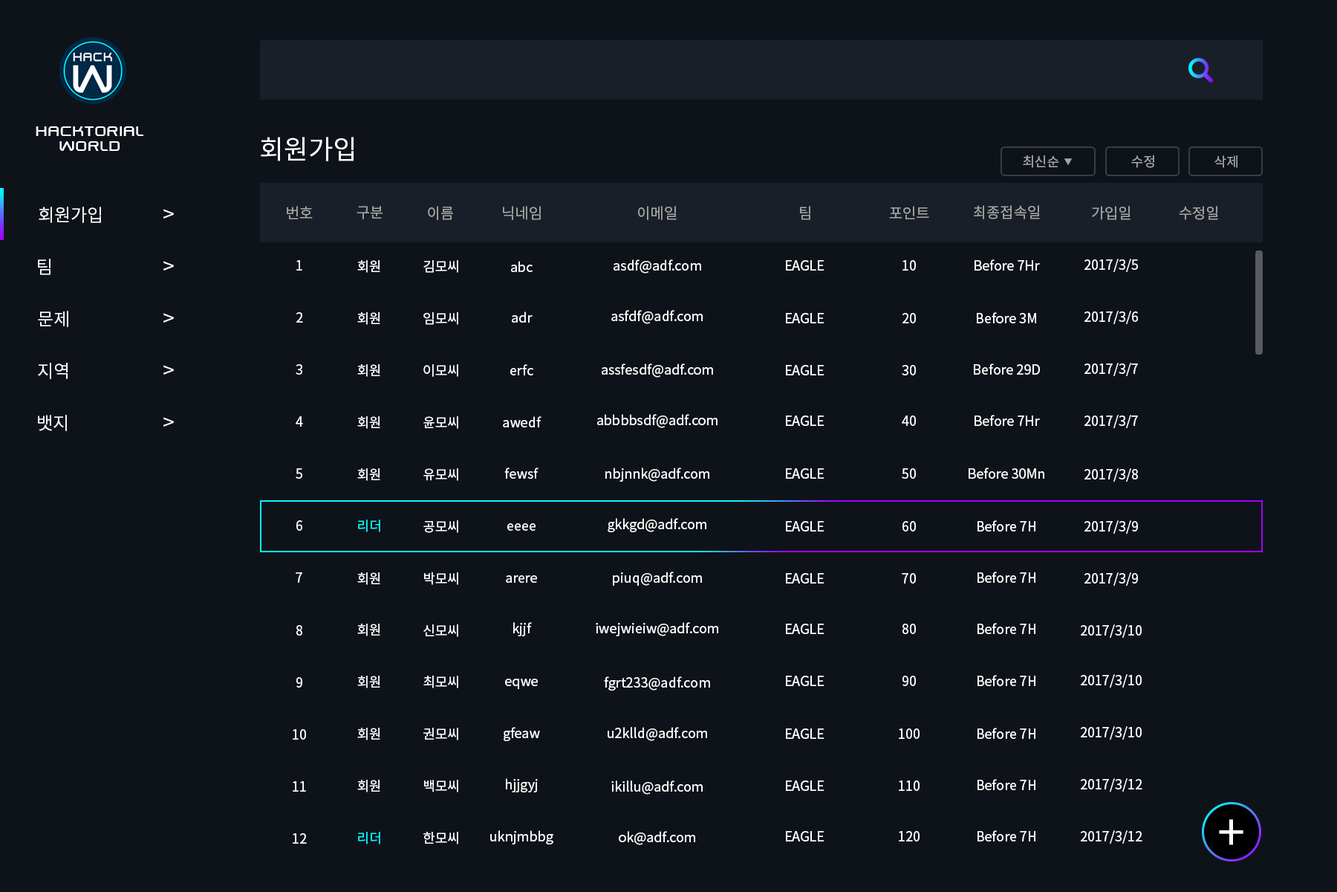
<style>
.page{position:relative;width:1337px;height:892px;background:#0e131a}
.page>*{position:absolute;margin:0}
.t1{font:17.8px/14.9px "SwiszRegular";color:#ffffff}
.t2{font:26.7px "NotoSansCJKkr-Regular";color:#ffffff}
.t3{font:13.4px "NotoSansCJKkr-Regular";color:#a6a6a6}
.t4{font:7.4px "NotoSansCJKkr-Regular";color:#a6a6a6}
.t5{font:13.4px "NotoSansCJKkr-Regular";color:#a3a3a3}
.t6{font:17.8px "NotoSansCJKkr-Regular";color:#ffffff}
.t7{font:20.8px "NotoSansCJKkr-Regular";color:#ffffff}
.t8{font:14.9px "NotoSansCJKkr-Regular";color:#a3a3a3}
.t9{font:13.4px "NotoSansCJKkr-Regular";color:#ffffff}
.t10{font:13.4px "NotoSansCJKkr-Regular";color:#00ffff}
.t11{font:49.8px "NotoSansCJKkr-Regular";color:#ffffff}
</style>
<div class="page">
<p class="t1" style="left:36px;top:126px;width:107px;height:25px;text-align:center">hacktorial<br>world</p>
<p class="t2" style="left:261px;top:137px;width:93px;height:24px">회원가입</p>
<p class="t3" style="left:1023px;top:155px;width:37px;height:13px">최신순</p>
<p class="t4" style="left:1065px;top:158px;width:7px;height:7px">▼</p>
<p class="t3" style="left:1132px;top:155px;width:23px;height:13px">수정</p>
<p class="t5" style="left:1215px;top:155px;width:23px;height:13px">삭제</p>
<p class="t6" style="left:39px;top:207px;width:62px;height:16px">회원가입</p>
<p class="t7" style="left:163px;top:209px;width:11px;height:9px">&gt;</p>
<p class="t8" style="left:287px;top:206px;width:26px;height:13px">번호</p>
<p class="t8" style="left:357px;top:206px;width:26px;height:13px">구분</p>
<p class="t8" style="left:428px;top:206px;width:25px;height:14px">이름</p>
<p class="t8" style="left:503px;top:206px;width:38px;height:14px">닉네임</p>
<p class="t8" style="left:638px;top:206px;width:39px;height:14px">이메일</p>
<p class="t8" style="left:800px;top:206px;width:11px;height:14px">팀</p>
<p class="t8" style="left:889px;top:206px;width:40px;height:13px">포인트</p>
<p class="t8" style="left:974px;top:205px;width:66px;height:14px">최종접속일</p>
<p class="t8" style="left:1092px;top:206px;width:39px;height:14px">가입일</p>
<p class="t8" style="left:1179px;top:206px;width:40px;height:14px">수정일</p>
<p class="t6" style="left:38px;top:259px;width:13px;height:16px">팀</p>
<p class="t7" style="left:163px;top:261px;width:11px;height:9px">&gt;</p>
<p class="t9" style="left:296px;top:260px;width:6px;height:10px">1</p>
<p class="t9" style="left:357px;top:260px;width:23px;height:13px">회원</p>
<p class="t9" style="left:424px;top:260px;width:34px;height:13px">김모씨</p>
<p class="t9" style="left:511px;top:261px;width:22px;height:11px">abc</p>
<p class="t9" style="left:614px;top:259px;width:87px;height:14px">asdf@adf.com</p>
<p class="t9" style="left:786px;top:260px;width:39px;height:10px">EAGLE</p>
<p class="t9" style="left:903px;top:260px;width:13px;height:10px">10</p>
<p class="t9" style="left:975px;top:259px;width:65px;height:11px">Before 7Hr</p>
<p class="t9" style="left:1085px;top:259px;width:53px;height:13px">2017/3/5</p>
<p class="t6" style="left:38px;top:311px;width:30px;height:16px">문제</p>
<p class="t7" style="left:163px;top:313px;width:11px;height:9px">&gt;</p>
<p class="t9" style="left:296px;top:312px;width:7px;height:10px">2</p>
<p class="t9" style="left:357px;top:312px;width:23px;height:13px">회원</p>
<p class="t9" style="left:424px;top:312px;width:34px;height:13px">임모씨</p>
<p class="t9" style="left:512px;top:311px;width:21px;height:11px">adr</p>
<p class="t9" style="left:611px;top:310px;width:92px;height:14px">asfdf@adf.com</p>
<p class="t9" style="left:786px;top:313px;width:39px;height:10px">EAGLE</p>
<p class="t9" style="left:903px;top:313px;width:13px;height:10px">20</p>
<p class="t9" style="left:977px;top:312px;width:59px;height:11px">Before 3M</p>
<p class="t9" style="left:1085px;top:311px;width:53px;height:13px">2017/3/6</p>
<p class="t6" style="left:38px;top:363px;width:30px;height:16px">지역</p>
<p class="t7" style="left:163px;top:365px;width:11px;height:9px">&gt;</p>
<p class="t9" style="left:296px;top:364px;width:6px;height:10px">3</p>
<p class="t9" style="left:357px;top:364px;width:23px;height:13px">회원</p>
<p class="t9" style="left:424px;top:364px;width:34px;height:13px">이모씨</p>
<p class="t9" style="left:510px;top:364px;width:23px;height:11px">erfc</p>
<p class="t9" style="left:602px;top:363px;width:111px;height:14px">assfesdf@adf.com</p>
<p class="t9" style="left:786px;top:365px;width:39px;height:10px">EAGLE</p>
<p class="t9" style="left:902px;top:365px;width:14px;height:10px">30</p>
<p class="t9" style="left:974px;top:363px;width:66px;height:11px">Before 29D</p>
<p class="t9" style="left:1085px;top:363px;width:53px;height:13px">2017/3/7</p>
<p class="t9" style="left:597px;top:414px;width:121px;height:14px">abbbbsdf@adf.com</p>
<p class="t6" style="left:38px;top:415px;width:29px;height:16px">뱃지</p>
<p class="t7" style="left:163px;top:417px;width:11px;height:9px">&gt;</p>
<p class="t9" style="left:296px;top:416px;width:7px;height:10px">4</p>
<p class="t9" style="left:357px;top:416px;width:23px;height:13px">회원</p>
<p class="t9" style="left:424px;top:416px;width:34px;height:13px">윤모씨</p>
<p class="t9" style="left:503px;top:416px;width:39px;height:11px">awedf</p>
<p class="t9" style="left:786px;top:415px;width:39px;height:11px">EAGLE</p>
<p class="t9" style="left:902px;top:415px;width:14px;height:11px">40</p>
<p class="t9" style="left:975px;top:415px;width:65px;height:11px">Before 7Hr</p>
<p class="t9" style="left:1085px;top:415px;width:53px;height:13px">2017/3/7</p>
<p class="t9" style="left:296px;top:468px;width:6px;height:10px">5</p>
<p class="t9" style="left:357px;top:468px;width:23px;height:13px">회원</p>
<p class="t9" style="left:424px;top:468px;width:34px;height:13px">유모씨</p>
<p class="t9" style="left:504px;top:467px;width:35px;height:11px">fewsf</p>
<p class="t9" style="left:606px;top:467px;width:104px;height:14px">nbjnnk@adf.com</p>
<p class="t9" style="left:786px;top:468px;width:39px;height:10px">EAGLE</p>
<p class="t9" style="left:902px;top:468px;width:14px;height:10px">50</p>
<p class="t9" style="left:969px;top:467px;width:76px;height:11px">Before 30Mn</p>
<p class="t9" style="left:1085px;top:468px;width:53px;height:13px">2017/3/8</p>
<p class="t9" style="left:296px;top:520px;width:6px;height:11px">6</p>
<p class="t10" style="left:358px;top:519px;width:22px;height:13px">리더</p>
<p class="t9" style="left:424px;top:520px;width:34px;height:13px">공모씨</p>
<p class="t9" style="left:608px;top:518px;width:99px;height:14px">gkkgd@adf.com</p>
<p class="t9" style="left:786px;top:521px;width:39px;height:10px">EAGLE</p>
<p class="t9" style="left:903px;top:521px;width:13px;height:10px">60</p>
<p class="t9" style="left:978px;top:520px;width:58px;height:11px">Before 7H</p>
<p class="t9" style="left:1085px;top:520px;width:53px;height:13px">2017/3/9</p>
<p class="t9" style="left:507px;top:523px;width:29px;height:8px">eeee</p>
<p class="t9" style="left:296px;top:572px;width:6px;height:11px">7</p>
<p class="t9" style="left:357px;top:572px;width:23px;height:13px">회원</p>
<p class="t9" style="left:424px;top:571px;width:34px;height:14px">박모씨</p>
<p class="t9" style="left:506px;top:575px;width:31px;height:8px">arere</p>
<p class="t9" style="left:613px;top:571px;width:89px;height:14px">piuq@adf.com</p>
<p class="t9" style="left:786px;top:573px;width:39px;height:10px">EAGLE</p>
<p class="t9" style="left:902px;top:573px;width:14px;height:10px">70</p>
<p class="t9" style="left:978px;top:571px;width:58px;height:12px">Before 7H</p>
<p class="t9" style="left:1085px;top:572px;width:53px;height:13px">2017/3/9</p>
<p class="t9" style="left:296px;top:625px;width:6px;height:10px">8</p>
<p class="t9" style="left:357px;top:623px;width:23px;height:13px">회원</p>
<p class="t9" style="left:424px;top:624px;width:34px;height:13px">신모씨</p>
<p class="t9" style="left:513px;top:622px;width:19px;height:14px">kjjf</p>
<p class="t9" style="left:596px;top:622px;width:122px;height:14px">iwejwieiw@adf.com</p>
<p class="t9" style="left:786px;top:623px;width:39px;height:11px">EAGLE</p>
<p class="t9" style="left:903px;top:623px;width:13px;height:11px">80</p>
<p class="t9" style="left:978px;top:623px;width:58px;height:11px">Before 7H</p>
<p class="t9" style="left:1081px;top:624px;width:61px;height:13px">2017/3/10</p>
<p class="t9" style="left:296px;top:677px;width:6px;height:10px">9</p>
<p class="t9" style="left:357px;top:675px;width:23px;height:13px">회원</p>
<p class="t9" style="left:424px;top:675px;width:34px;height:13px">최모씨</p>
<p class="t9" style="left:604px;top:676px;width:106px;height:14px">fgrt233@adf.com</p>
<p class="t9" style="left:786px;top:675px;width:39px;height:11px">EAGLE</p>
<p class="t9" style="left:903px;top:675px;width:13px;height:11px">90</p>
<p class="t9" style="left:978px;top:675px;width:58px;height:11px">Before 7H</p>
<p class="t9" style="left:1081px;top:674px;width:61px;height:13px">2017/3/10</p>
<p class="t9" style="left:505px;top:678px;width:33px;height:11px">eqwe</p>
<p class="t9" style="left:1081px;top:726px;width:61px;height:13px">2017/3/10</p>
<p class="t9" style="left:293px;top:729px;width:13px;height:10px">10</p>
<p class="t9" style="left:357px;top:727px;width:23px;height:13px">회원</p>
<p class="t9" style="left:424px;top:727px;width:34px;height:13px">권모씨</p>
<p class="t9" style="left:504px;top:727px;width:36px;height:14px">gfeaw</p>
<p class="t9" style="left:608px;top:727px;width:99px;height:14px">u2klld@adf.com</p>
<p class="t9" style="left:786px;top:728px;width:39px;height:11px">EAGLE</p>
<p class="t9" style="left:899px;top:728px;width:21px;height:11px">100</p>
<p class="t9" style="left:978px;top:727px;width:58px;height:12px">Before 7H</p>
<p class="t9" style="left:293px;top:781px;width:13px;height:10px">11</p>
<p class="t9" style="left:357px;top:779px;width:23px;height:13px">회원</p>
<p class="t9" style="left:424px;top:779px;width:34px;height:13px">백모씨</p>
<p class="t9" style="left:506px;top:778px;width:32px;height:14px">hjjgyj</p>
<p class="t9" style="left:611px;top:780px;width:92px;height:14px">ikillu@adf.com</p>
<p class="t9" style="left:786px;top:780px;width:39px;height:11px">EAGLE</p>
<p class="t9" style="left:899px;top:780px;width:21px;height:11px">110</p>
<p class="t9" style="left:978px;top:779px;width:58px;height:11px">Before 7H</p>
<p class="t9" style="left:1081px;top:778px;width:62px;height:13px">2017/3/12</p>
<p class="t11" style="left:1219px;top:819px;width:25px;height:26px">+</p>
<p class="t9" style="left:293px;top:833px;width:14px;height:10px">12</p>
<p class="t10" style="left:358px;top:831px;width:22px;height:13px">리더</p>
<p class="t9" style="left:424px;top:831px;width:34px;height:13px">한모씨</p>
<p class="t9" style="left:490px;top:830px;width:64px;height:14px">uknjmbbg</p>
<p class="t9" style="left:619px;top:831px;width:76px;height:14px">ok@adf.com</p>
<p class="t9" style="left:786px;top:831px;width:39px;height:10px">EAGLE</p>
<p class="t9" style="left:899px;top:831px;width:21px;height:10px">120</p>
<p class="t9" style="left:978px;top:830px;width:58px;height:11px">Before 7H</p>
<p class="t9" style="left:1081px;top:830px;width:62px;height:13px">2017/3/12</p>
</div>
